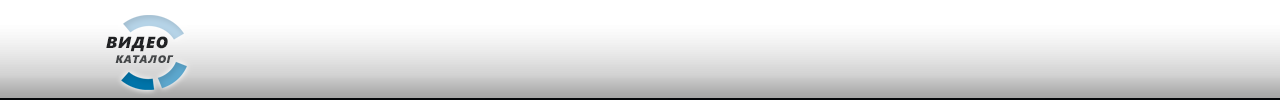
<style>
.page{position:relative;width:1280px;height:100px;background:#ffffff}
.page>*{position:absolute;margin:0}
.t1{font:16px "SegoeUIBlack-Italic";letter-spacing:0.05em;color:#212324}
.t2{font:11px "SegoeUIBlack-Italic";letter-spacing:0.05em;color:#454749}
</style>
<div class="page">
<p class="t1" style="left:106px;top:36px;width:62px;height:16px">ВИДЕО</p>
<p class="t2" style="left:115px;top:55px;width:59px;height:8px">КАТАЛОГ</p>
</div>
